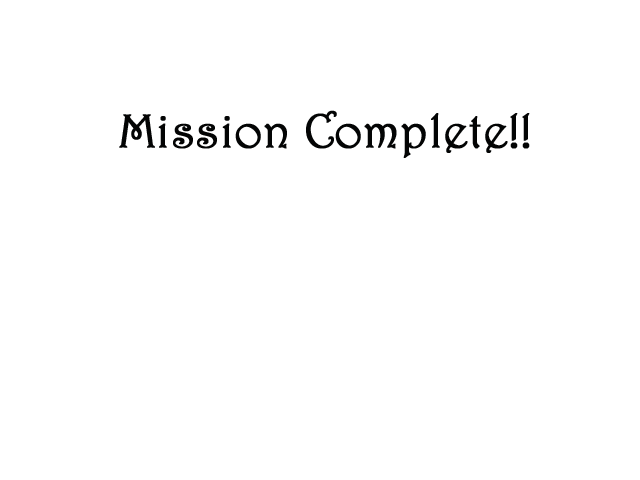
<style>
.page{position:relative;width:640px;height:480px;background:#ffffff}
.page>*{position:absolute;margin:0}
.t1{font:48px "Harrington";color:#030404;font-weight:bold}
</style>
<div class="page">
<p class="t1" style="left:119px;top:110px;width:411px;height:48px">Mission Complete!!</p>
</div>
